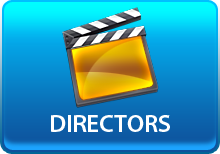
<style>
.page{position:relative;width:220px;height:154px}
.page>*{position:absolute;margin:0}
.t1{font:25px "MyriadPro-Semibold";color:#ffffff;text-transform:uppercase}
</style>
<div class="page">
<p class="t1" style="left:51px;top:115px;width:119px;height:17px">directors</p>
</div>
